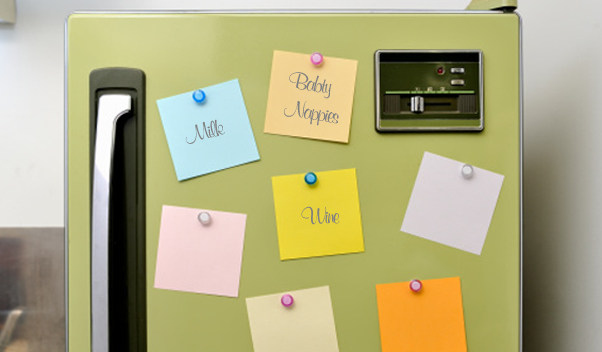
<style>
.page{position:relative;width:602px;height:352px}
.page>*{position:absolute;margin:0}
.t1{font:23.4px "MurrayHillBT-Bold";letter-spacing:-0.08em;color:#808080}
</style>
<div class="page">
<p class="t1" style="left:283px;top:72px;width:56px;height:54px;rotate:9deg">Babty<br>Nappies</p>
<p class="t1" style="left:185px;top:119px;width:40px;height:25px;rotate:-15deg">Milk</p>
<p class="t1" style="left:301px;top:206px;width:39px;height:19px">Wine</p>
</div>
